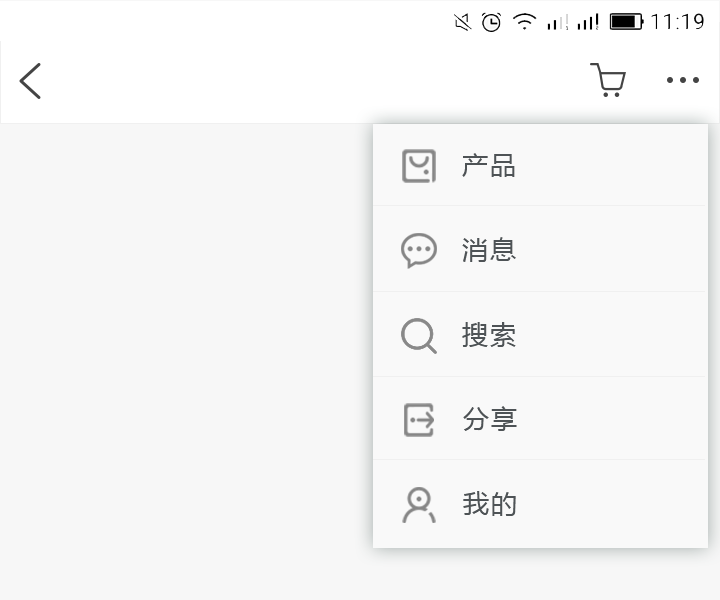
<style>
.page{position:relative;width:720px;height:600px;background:#f7f7f7}
.page>*{position:absolute;margin:0}
.t1{font:26px "MicrosoftYaHei";letter-spacing:0.075em;color:#4e5356}
</style>
<div class="page">
<p class="t1" style="left:462px;top:153px;width:53px;height:24px">产品</p>
<p class="t1" style="left:462px;top:237px;width:54px;height:25px">消息</p>
<p class="t1" style="left:462px;top:322px;width:54px;height:25px">搜索</p>
<p class="t1" style="left:463px;top:406px;width:54px;height:25px">分享</p>
<p class="t1" style="left:463px;top:491px;width:53px;height:25px">我的</p>
</div>
